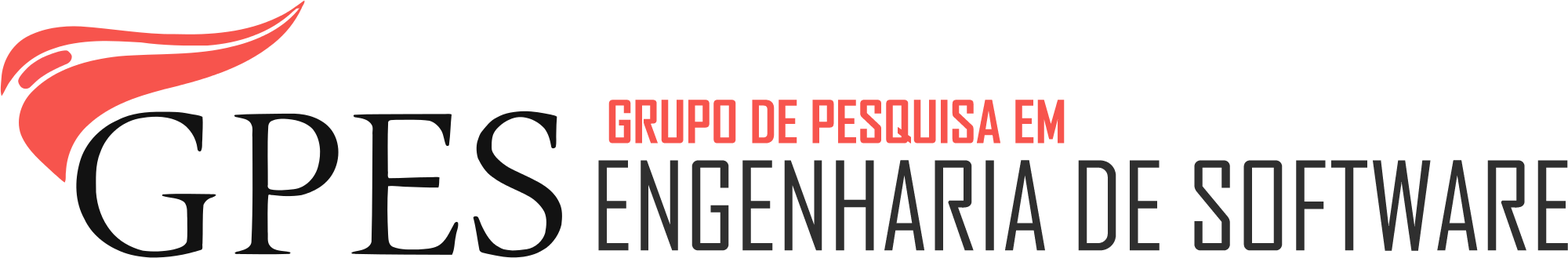
<style>
.page{position:relative;width:1568px;height:258px;background:#ffffff}
.page>*{position:absolute;margin:0}
.t1{font:56.4px "AgencyFB-Bold";color:#f7544d}
.t2{font:117.6px "AgencyFB-Reg";color:#2f2f2f}
</style>
<div class="page">
<p class="t1" style="left:608px;top:100px;width:457px;height:43px">GRUPO DE PESQUISA EM</p>
<p class="t2" style="left:598px;top:160px;width:970px;height:91px">ENGENHARIA DE SOFTWARE</p>
</div>
